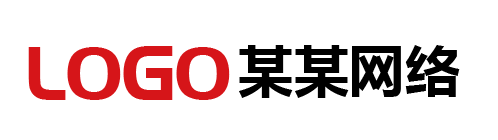
<style>
.page{position:relative;width:498px;height:140px;background:#ffffff}
.page>*{position:absolute;margin:0}
.t1{font:80px "PangMenZhengDao";letter-spacing:-0.025em;color:#d61519}
.t2{font:55px "MicrosoftYaHei-Bold";letter-spacing:0.01em;color:#000000}
</style>
<div class="page">
<p class="t1" style="left:28px;top:46px;width:202px;height:54px">LOGO</p>
<p class="t2" style="left:239px;top:45px;width:221px;height:53px">某某网络</p>
</div>
